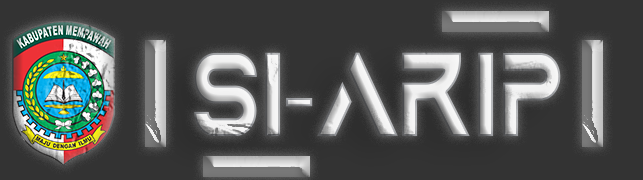
<style>
.page{position:relative;width:643px;height:180px;background:#333333}
.page>*{position:absolute;margin:0}
.t1{font:125.6px "AquireBold";letter-spacing:-0.025em;scale:0.84 1}
.t2{font:125.6px "MyriadPro-Regular";letter-spacing:-0.025em;scale:0.84 1}
</style>
<div class="page">
<p class="t1" style="left:194px;top:52px;width:367px;height:85px">SI<span class="t2">-</span>AriP</p>
</div>
